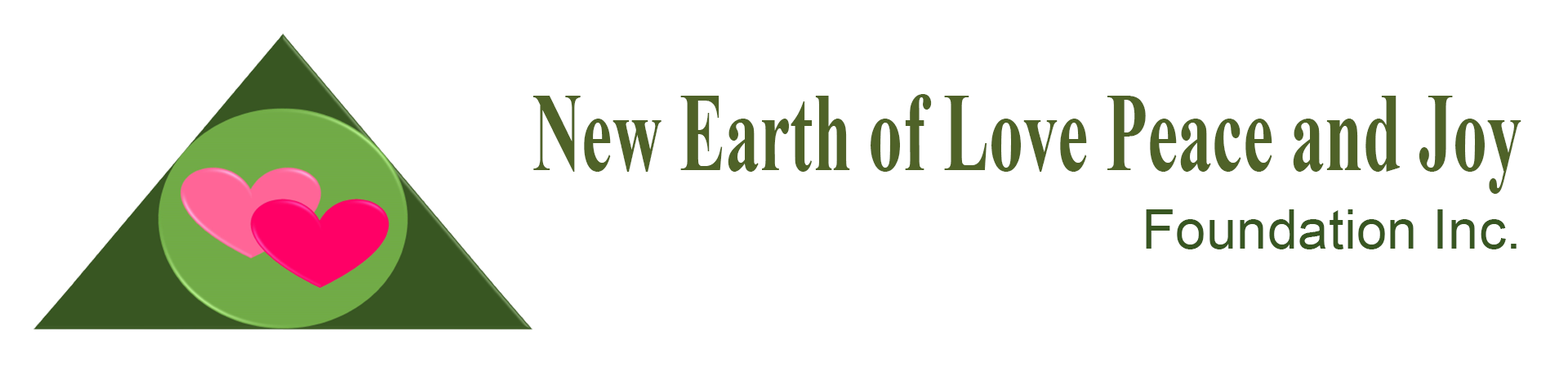
<style>
.page{position:relative;width:1568px;height:368px;background:#ffffff}
.page>*{position:absolute;margin:0}
.t1{font:111.2px "TimesNewRomanPS-BoldMT";color:#4f6228;scale:0.62 1}
.t2{font:55.1px "ArialMT";color:#385622}
</style>
<div class="page">
<p class="t1" style="left:533px;top:94px;width:988px;height:100px">New Earth of Love Peace and Joy</p>
<p class="t2" style="left:1146px;top:209px;width:371px;height:40px">Foundation Inc.</p>
</div>
